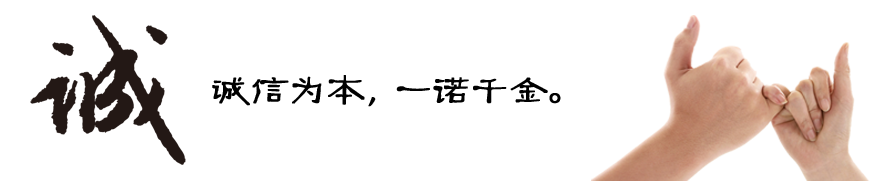
<style>
.page{position:relative;width:870px;height:181px;background:#ffffff}
.page>*{position:absolute;margin:0}
.t1{font:40px "FZGLJW--GB1-0";letter-spacing:-0.025em;color:#010101;font-weight:bold}
</style>
<div class="page">
<p class="t1" style="left:212px;top:75px;width:349px;height:32px">诚信为本，一诺千金。</p>
</div>
